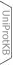
<style>
.page{position:relative;width:13px;height:65px;background:#fefefe}
.page>*{position:absolute;margin:0}
.t1{font:10px "Tahoma";letter-spacing:0.01em;color:#8e8e8e}
</style>
<div class="page">
<p class="t1" style="left:0px;top:10px;width:11px;height:45px;rotate:90deg">UniProtKB</p>
</div>
